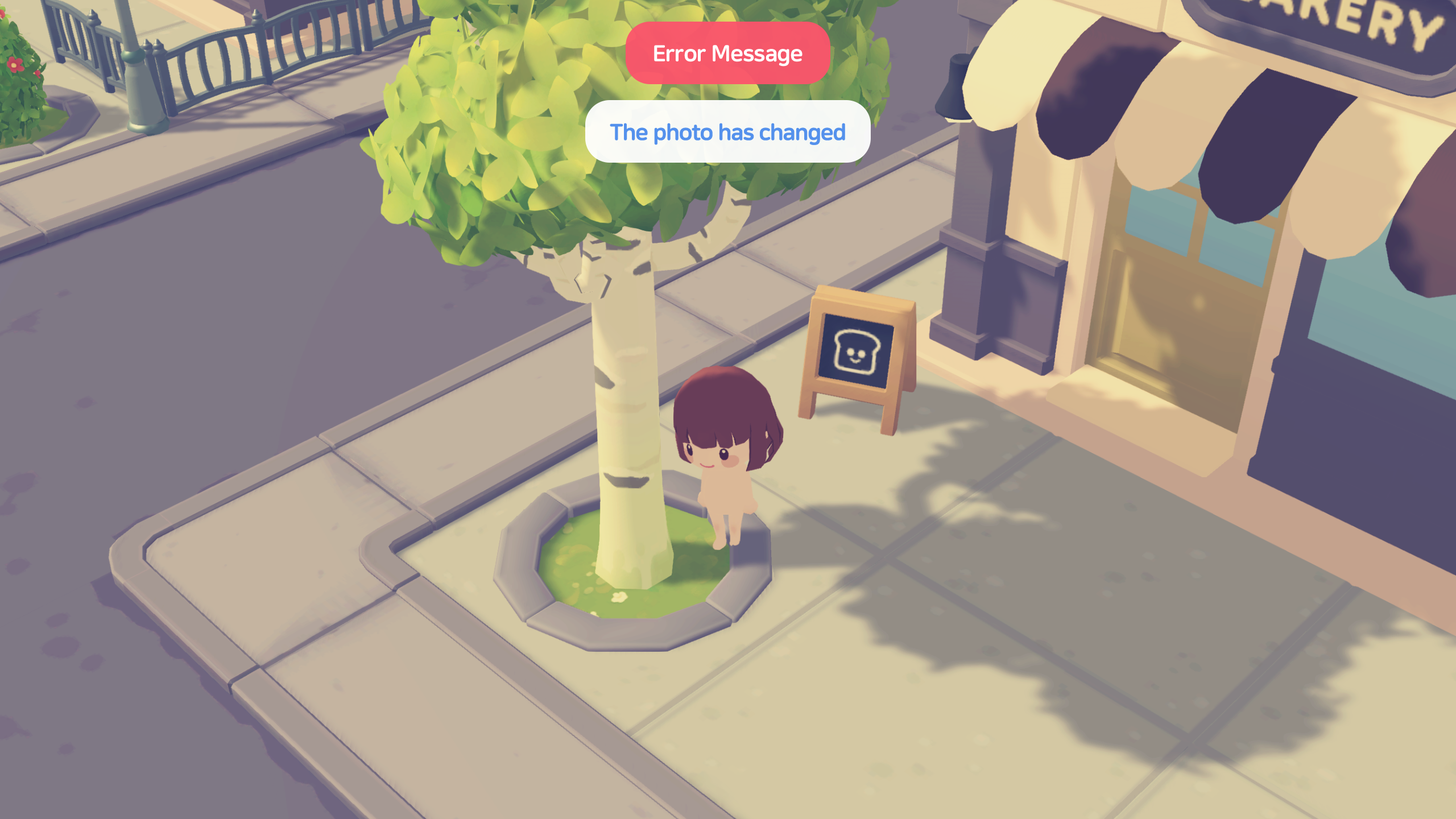
<style>
.page{position:relative;width:1456px;height:819px}
.page>*{position:absolute;margin:0}
.t1{font:22.7px "NanumSquareRoundEB";letter-spacing:-0.02em;color:#ffffff}
.t2{font:22.7px "NanumSquareRoundEB";letter-spacing:-0.03em;color:#5491ec}
</style>
<div class="page">
<p class="t1" style="left:654px;top:45px;width:148px;height:22px">Error Message</p>
<p class="t2" style="left:610px;top:123px;width:235px;height:22px">The photo has changed</p>
</div>
